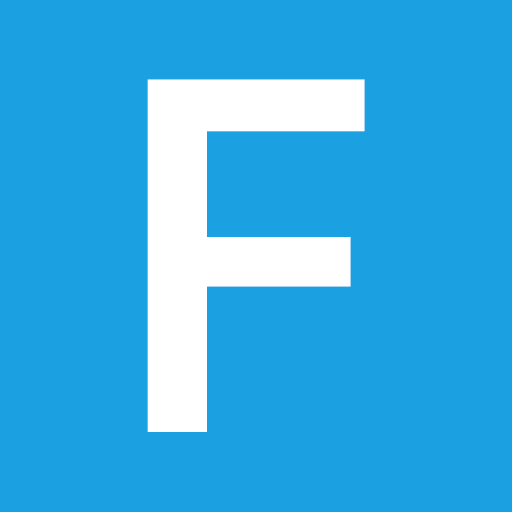
<style>
.page{position:relative;width:512px;height:512px;background:#1ba1e2}
.page>*{position:absolute;margin:0}
.t1{font:500px "SFMono-Semibold";color:#ffffff}
</style>
<div class="page">
<p class="t1" style="left:147px;top:79px;width:218px;height:353px">F</p>
</div>
